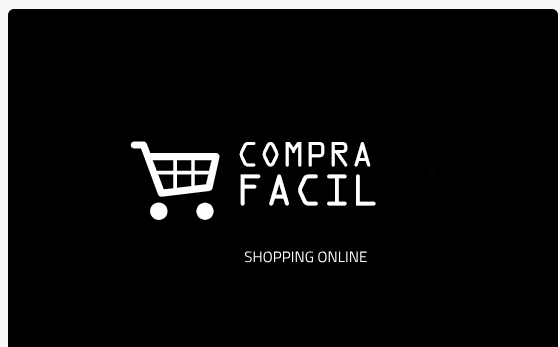
<style>
.page{position:relative;width:560px;height:347px;background:#000000}
.page>*{position:absolute;margin:0}
.t1{font:31.6px "OCRAStd";color:#ffffff}
.t2{font:40px "OCRAStd";color:#ffffff}
</style>
<div class="page">
<p class="t1" style="left:239px;top:142px;width:132px;height:25px">COMPRA</p>
<p class="t2" style="left:240px;top:174px;width:136px;height:32px">FACIL</p>
</div>
